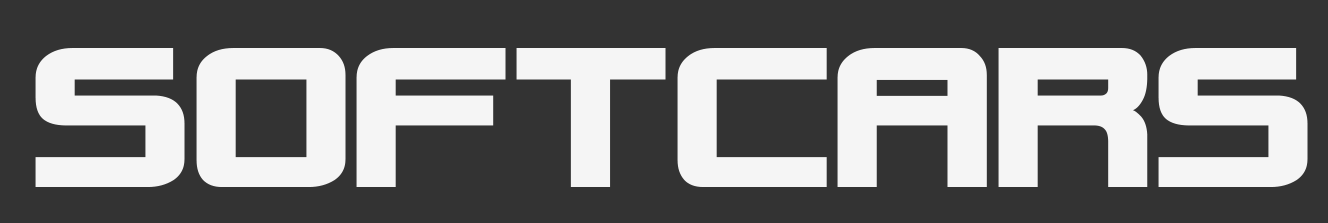
<style>
.page{position:relative;width:1328px;height:223px;background:#333333}
.page>*{position:absolute;margin:0}
.t1{font:213.3px "CharlieBrownM54";color:#f5f5f5}
</style>
<div class="page">
<p class="t1" style="left:35px;top:48px;width:1273px;height:139px">SOFTCARS</p>
</div>
